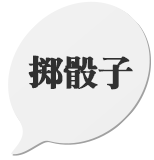
<style>
.page{position:relative;width:154px;height:160px;background:#f0f0f0}
.page>*{position:absolute;margin:0}
.t1{font:36px "DFPSongW9";letter-spacing:-0.05em;color:#313131;font-weight:bold}
</style>
<div class="page">
<p class="t1" style="left:28px;top:55px;width:105px;height:35px">掷骰子</p>
</div>
